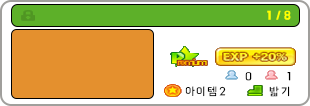
<style>
.page{position:relative;width:310px;height:106px;background:#ffffff}
.page>*{position:absolute;margin:0}
.t1{font:12px "BMHANNAProOTF";letter-spacing:0.32em;color:#ffff00}
.t2{font:12px "BMHANNAAirOTF";letter-spacing:0.02em;color:#000000}
.t3{font:12px "BMHANNAAirOTF";letter-spacing:0.12em;color:#000000}
</style>
<div class="page">
<p class="t1" style="left:267px;top:10px;width:24px;height:10px">1/8</p>
<p class="t2" style="left:245px;top:72px;width:7px;height:9px">0</p>
<p class="t2" style="left:287px;top:72px;width:4px;height:9px">1</p>
<p class="t3" style="left:185px;top:86px;width:41px;height:11px">아이템2</p>
<p class="t3" style="left:269px;top:86px;width:21px;height:11px">밟기</p>
</div>
